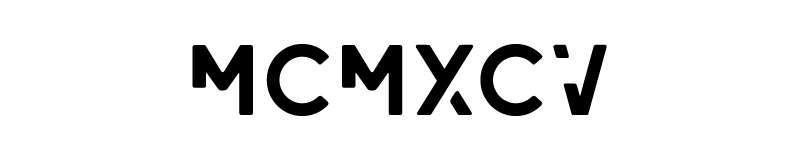
<style>
.page{position:relative;width:800px;height:160px;background:#ffffff}
.page>*{position:absolute;margin:0}
.t1{font:100px "LEIXO-DEMO";color:#000000}
</style>
<div class="page">
<p class="t1" style="left:192px;top:44px;width:415px;height:72px">MCMXCV</p>
</div>
